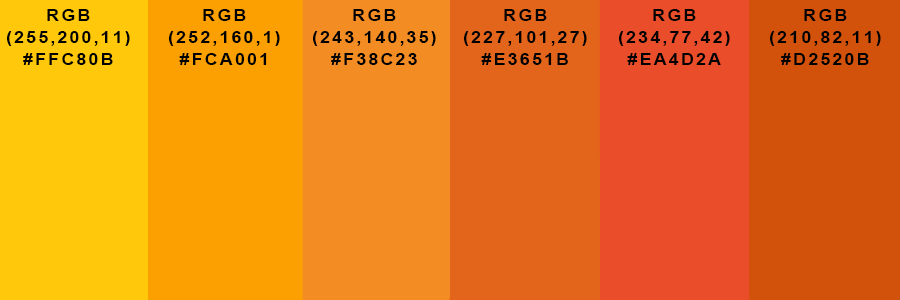
<style>
.page{position:relative;width:900px;height:300px}
.page>*{position:absolute;margin:0}
.t1{font:16.6px "Arial-BoldMT";letter-spacing:0.1em;color:#000000;text-transform:uppercase;scale:1.11 1}
</style>
<div class="page">
<p class="t1" style="left:7px;top:9px;width:123px;height:56px;text-align:center">RGB<br>(255,200,11)<br>#ffc80b</p>
<p class="t1" style="left:169px;top:9px;width:111px;height:56px;text-align:center">RGB<br>(252,160,1)<br>#fca001</p>
<p class="t1" style="left:313px;top:9px;width:123px;height:56px;text-align:center">RGB<br>(243,140,35)<br>#f38c23</p>
<p class="t1" style="left:464px;top:9px;width:123px;height:56px;text-align:center">RGB<br>(227,101,27)<br>#e3651b</p>
<p class="t1" style="left:619px;top:9px;width:111px;height:56px;text-align:center">RGB<br>(234,77,42)<br>#ea4d2a</p>
<p class="t1" style="left:770px;top:9px;width:111px;height:56px;text-align:center">RGB<br>(210,82,11)<br>#d2520b</p>
</div>
